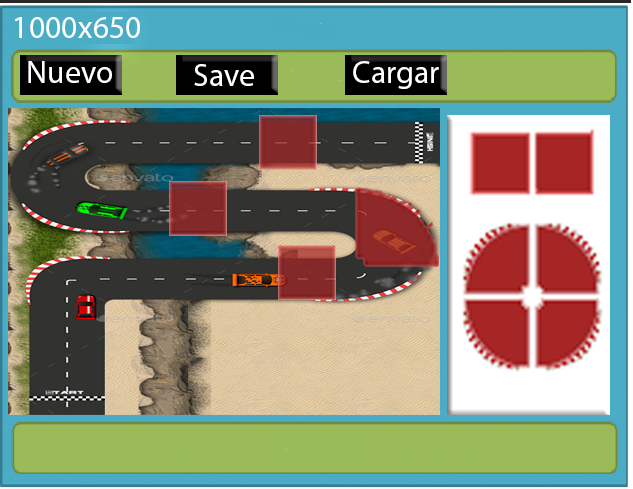
<style>
.page{position:relative;width:633px;height:489px}
.page>*{position:absolute;margin:0}
.t1{font:32px "MyriadPro-Regular";color:#ffffff}
</style>
<div class="page">
<p class="t1" style="left:15px;top:17px;width:125px;height:21px">1000x650z</p>
<p class="t1" style="left:28px;top:61px;width:84px;height:22px">Nuevo</p>
<p class="t1" style="left:194px;top:64px;width:60px;height:22px">Save</p>
<p class="t1" style="left:353px;top:61px;width:86px;height:28px">Cargar</p>
</div>
